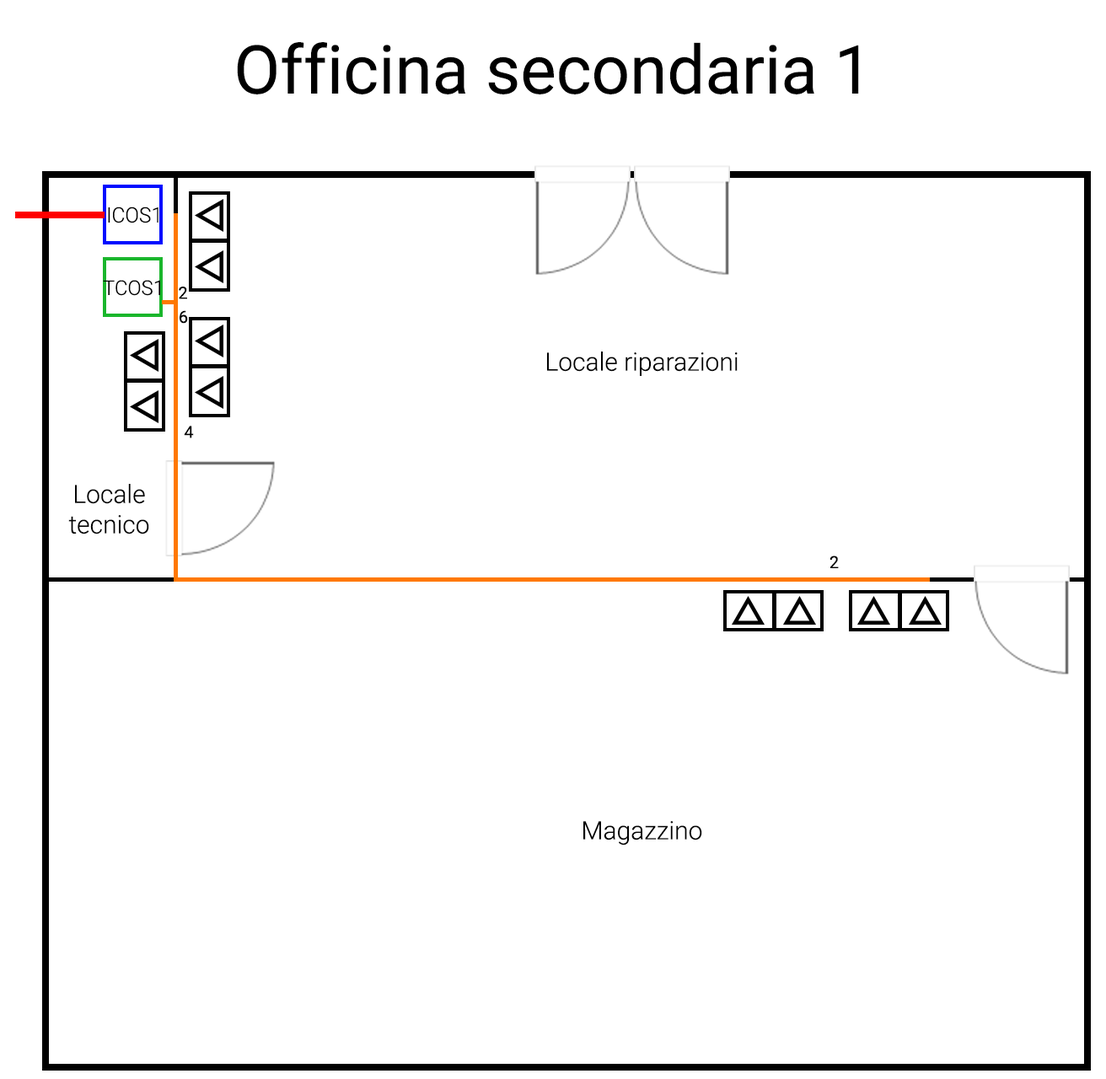
<style>
.page{position:relative;width:1106px;height:1079px;background:#ffffff}
.page>*{position:absolute;margin:0}
.t1{font:67.4px "Roboto-Regular";color:#000000}
.t2{font:21.1px "Roboto-Light";color:#000000}
.t3{font:20.2px "Roboto-Light";color:#000000}
.t4{font:16.9px "Roboto-Regular";color:#000000}
.t5{font:25.3px "Roboto-Light";color:#000000}
</style>
<div class="page">
<p class="t1" style="left:237px;top:42px;width:622px;height:52px">Officina secondaria 1</p>
<p class="t2" style="left:108px;top:206px;width:50px;height:17px">ICOS1</p>
<p class="t3" style="left:103px;top:280px;width:57px;height:16px">TCOS1</p>
<p class="t4" style="left:179px;top:286px;width:8px;height:13px">2</p>
<p class="t4" style="left:179px;top:310px;width:9px;height:14px">6</p>
<p class="t5" style="left:547px;top:351px;width:190px;height:25px">Locale riparazioni</p>
<p class="t4" style="left:184px;top:426px;width:10px;height:12px">4</p>
<p class="t5" style="left:68px;top:484px;width:81px;height:50px;text-align:center">Locale<br>tecnico</p>
<p class="t4" style="left:829px;top:555px;width:9px;height:13px">2</p>
<p class="t5" style="left:583px;top:821px;width:119px;height:24px">Magazzino</p>
</div>
